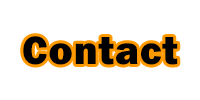
<style>
.page{position:relative;width:200px;height:100px;background:#ffffff}
.page>*{position:absolute;margin:0}
.t1{font:40.6px "FranklinGothic-Heavy";letter-spacing:0.025em;color:#ff8400}
</style>
<div class="page">
<p class="t1" style="left:23px;top:36px;width:155px;height:29px">Contact</p>
</div>
